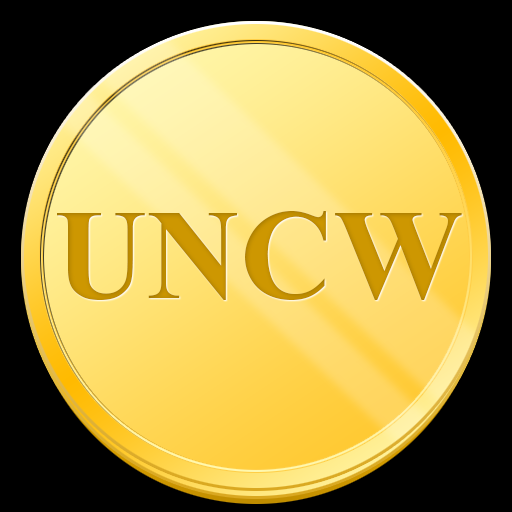
<style>
.page{position:relative;width:512px;height:512px;background:#000000}
.page>*{position:absolute;margin:0}
.t1{font:160px "Aparajita-Bold";color:#cd9701}
</style>
<div class="page">
<p class="t1" style="left:57px;top:211px;width:405px;height:89px">UNCWM</p>
</div>
